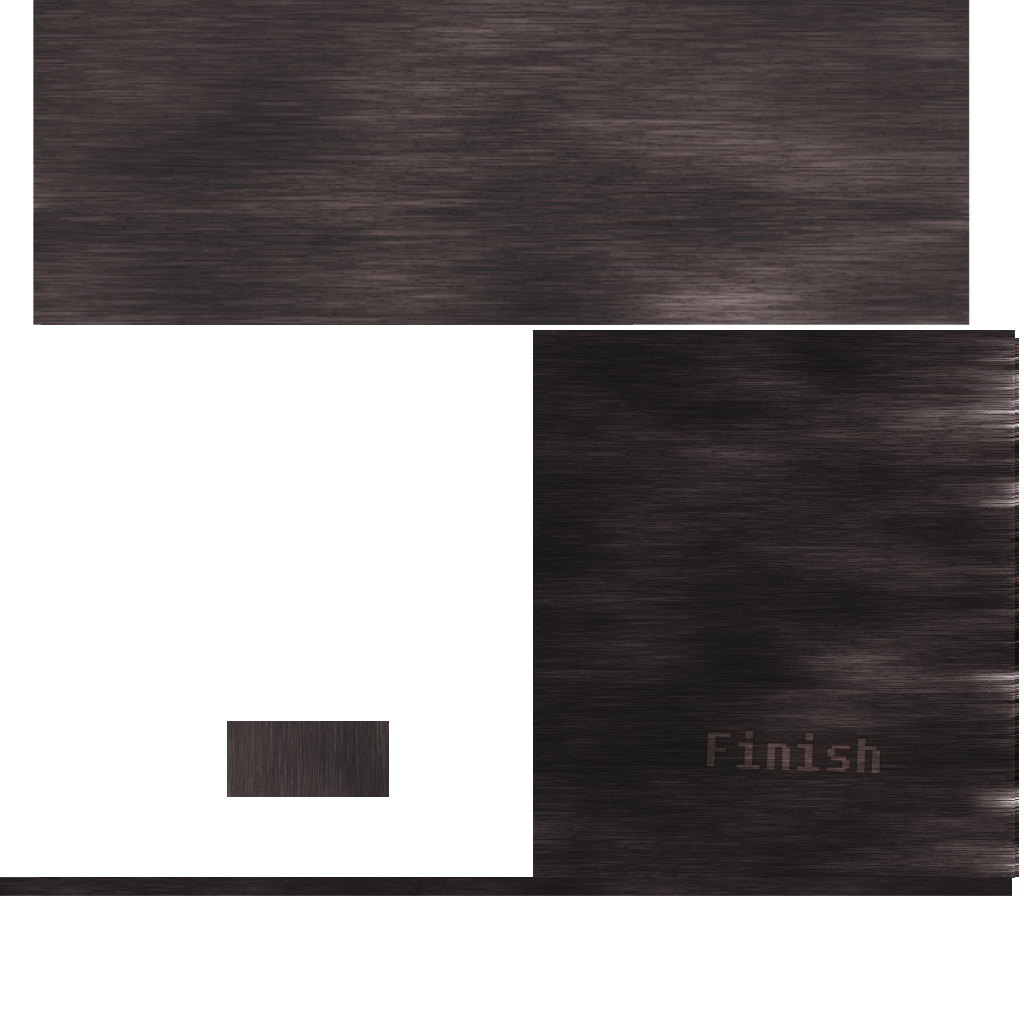
<style>
.page{position:relative;width:1024px;height:1024px;background:#ffffff}
.page>*{position:absolute;margin:0}
.t1{font:48px "Fixedsys";color:#493937}
</style>
<div class="page">
<p class="t1" style="left:706px;top:731px;width:175px;height:42px;rotate:2deg">Finish</p>
</div>
